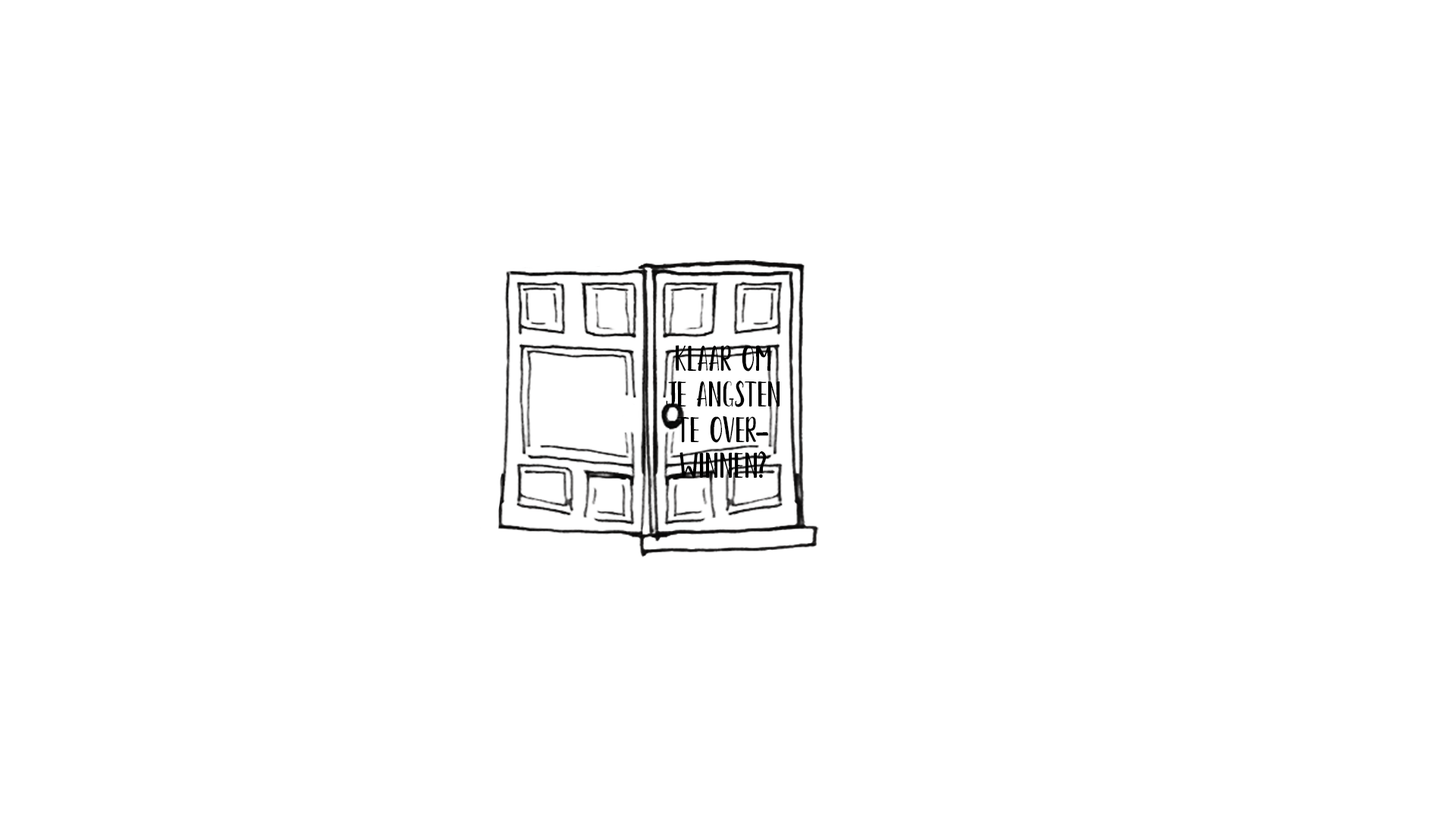
<style>
.page{position:relative;width:1456px;height:819px;background:#ffffff}
.page>*{position:absolute;margin:0}
.t1{font:34.9px/35.6px "AustraLite";color:#000000;text-transform:uppercase}
</style>
<div class="page">
<p class="t1" style="left:666px;top:345px;width:114px;height:134px;text-align:center">Klaar om je angsten te over-<br>winnen?</p>
</div>
